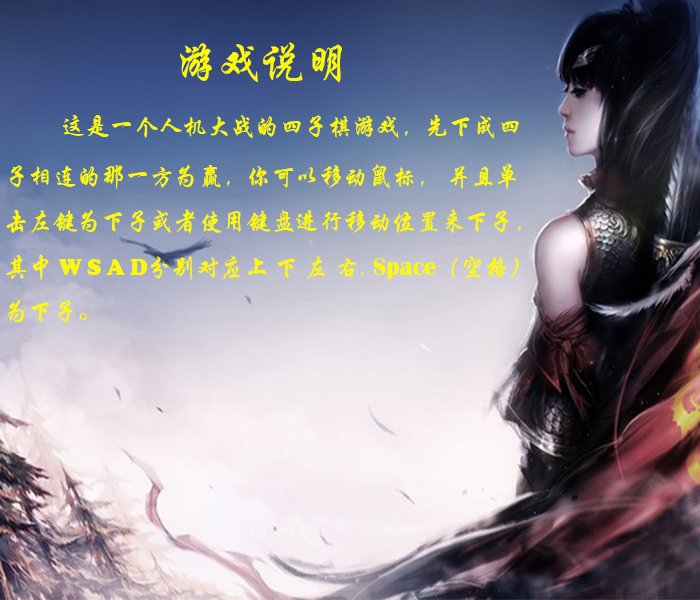
<style>
.page{position:relative;width:700px;height:600px}
.page>*{position:absolute;margin:0}
.t1{font:46.2px "STXingkai";color:#fcf900;scale:0.94 1}
.t2{font:25.7px "STXingkai";color:#fcf900;scale:0.94 1}
.t3{font:30.8px "STXingkai";color:#fcf900;scale:0.94 1}
.t4{font:23.1px "CooperBlack";color:#fcf900;scale:0.94 1}
.t5{font:25.7px "BritannicBold";color:#fcf900;scale:0.94 1}
</style>
<div class="page">
<p class="t1" style="left:180px;top:42px;width:162px;height:41px">游戏说明</p>
<p class="t2" style="left:6px;top:115px;width:515px;height:207px"><span class="t3">        </span>这是一个人机大战的四子棋游戏，先下成四<br>子相连的那一方为赢，你可以移动鼠标， 并且单<br>击左键为下子或者使用键盘进行移动位置来下子，<br>其中 <span class="t4">W S A D</span>分别对应上 下 左 右, <span class="t5">Space</span>（空格）<br>为下子。</p>
</div>
